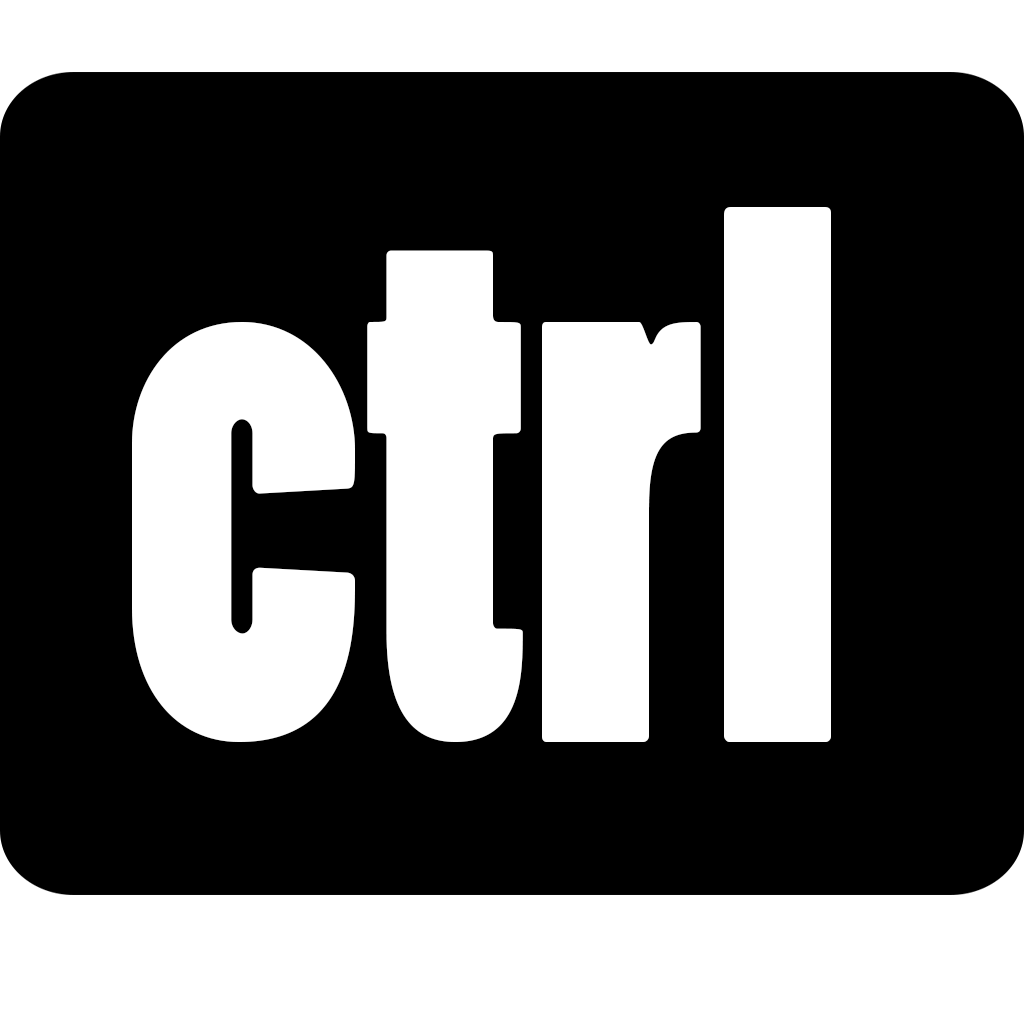
<style>
.page{position:relative;width:1024px;height:1024px;background:#000000}
.page>*{position:absolute;margin:0}
.t1{font:699.8px "PoplarStd";color:#ffffff;scale:0.94 1}
</style>
<div class="page">
<p class="t1" style="left:132px;top:207px;width:699px;height:535px">ctrl</p>
</div>
